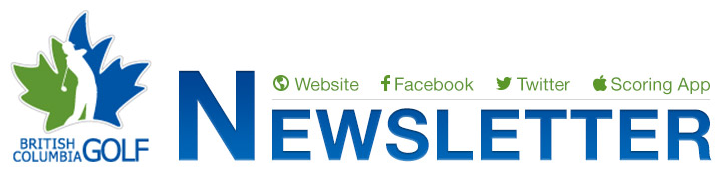
<style>
.page{position:relative;width:728px;height:171px;background:#ffffff}
.page>*{position:absolute;margin:0}
.t1{font:101.3px "HelveticaNeue-Bold";letter-spacing:0.029em;color:#0055a5;font-variant:small-caps}
.t2{font:125.6px "HelveticaNeue-Bold";letter-spacing:0.029em;color:#0055a5}
.t3{font:18px "HelveticaNeue";color:#5d9732}
</style>
<div class="page">
<p class="t1" style="left:179px;top:70px;width:533px;height:92px"><span class="t2">N</span>ewsletter</p>
<p class="t3" style="left:294px;top:77px;width:65px;height:14px">Website</p>
<p class="t3" style="left:395px;top:77px;width:79px;height:14px">Facebook</p>
<p class="t3" style="left:517px;top:77px;width:53px;height:14px">Twitter</p>
<p class="t3" style="left:611px;top:77px;width:99px;height:18px">Scoring App</p>
</div>
